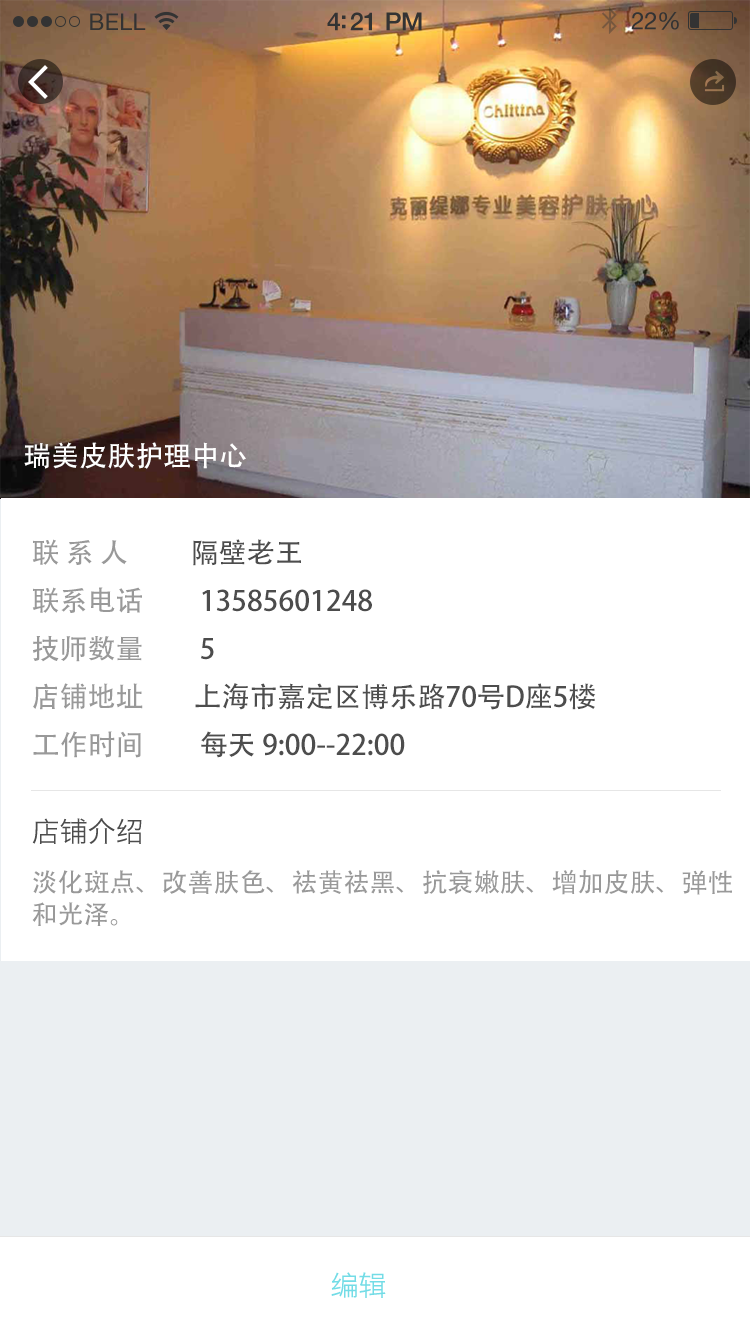
<style>
.page{position:relative;width:750px;height:1334px;background:#ffffff}
.page>*{position:absolute;margin:0}
.t1{font:28px "AdobeHeitiStd-Regular";color:#ffffff}
.t2{font:28px/48px "AdobeHeitiStd-Regular";color:#4d4d4d}
.t3{font:28px/48px "AdobeHeitiStd-Regular";color:#999999}
.t4{font:28px/48px "AdobeHeitiStd-Regular";color:#4c4c4c}
.t5{font:28px "HiraginoSansGB-W3";color:#4c4c4c}
.t6{font:26px/32px "AdobeHeitiStd-Regular";color:#999999}
.t7{font:28px "HiraginoSansGB-W3";color:#73dce6}
</style>
<div class="page">
<p class="t1" style="left:24px;top:442px;width:222px;height:27px">瑞美皮肤护理中心</p>
<p class="t2" style="left:32px;top:539px;width:564px;height:219px;text-align:justify"><span class="t3">联 系 人          </span>隔壁老王<br><span class="t3">联系电话         </span><span class="t4">13585601248<br></span><span class="t3">技师数量         </span><span class="t4">5<br></span><span class="t3">店铺地址        </span>上海市嘉定区博乐路70号D座5楼<br><span class="t3">工作时间 </span>        每天 9:00--22:00</p>
<p class="t5" style="left:32px;top:818px;width:110px;height:26px">店铺介绍</p>
<p class="t6" style="left:32px;top:869px;width:700px;height:57px;text-align:justify">淡化斑点、改善肤色、祛黄祛黑、抗衰嫩肤、增加皮肤、弹性<br>和光泽。</p>
<p class="t7" style="left:331px;top:1272px;width:55px;height:26px">编辑</p>
</div>
